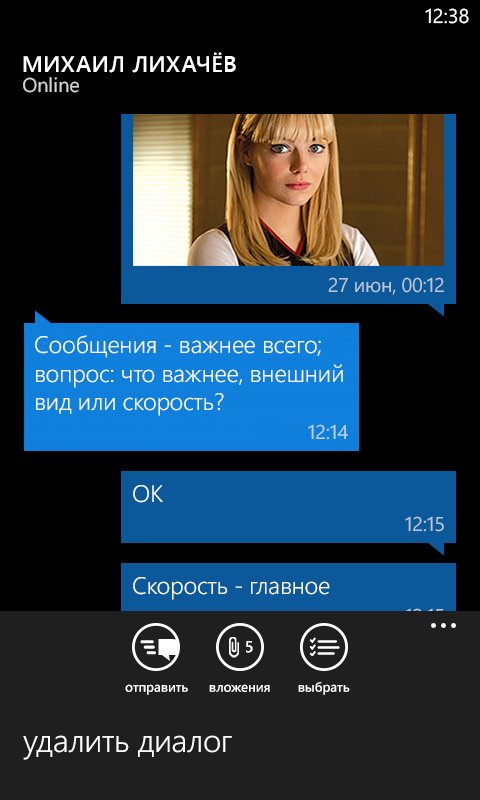
<style>
.page{position:relative;width:480px;height:800px;background:#000000}
.page>*{position:absolute;margin:0}
.t1{font:20px "SegoeWP";color:#ffffff}
.t2{font:22.7px "SegoeWP-Semibold";letter-spacing:0.025em;color:#ffffff;text-transform:uppercase}
.t3{font:24px "SegoeWP-SemiLight";letter-spacing:-0.015em;color:#ffffff}
.t4{font:16px "SegoeWP-Semibold";letter-spacing:-0.01em;color:#ffffff}
.t5{font:25.3px "SegoeWP";letter-spacing:-0.005em;color:#000000}
.t6{font:13.3px "SegoeWP-Semibold";letter-spacing:-0.01em;color:#ffffff}
.t7{font:32px "SegoeWP-SemiLight";letter-spacing:-0.01em;color:#ffffff}
</style>
<div class="page">
<p class="t1" style="left:425px;top:8px;width:44px;height:16px">12:38</p>
<p class="t2" style="left:23px;top:52px;width:213px;height:21px">Михаил Лихачёв</p>
<p class="t3" style="left:35px;top:335px;width:308px;height:81px">Сообщения - важнее всего;<br>вопрос: что важнее, внешний<br>вид или скорость?</p>
<p class="t3" style="left:133px;top:485px;width:30px;height:18px">ОК</p>
<p class="t3" style="left:133px;top:577px;width:197px;height:23px">Скорость - главное</p>
<p class="t4" style="left:246px;top:641px;width:7px;height:12px">5</p>
<p class="t5" style="left:135px;top:668px;width:227px;height:24px">введите сообщение</p>
<p class="t6" style="left:125px;top:684px;width:63px;height:11px">отправить</p>
<p class="t6" style="left:209px;top:684px;width:61px;height:8px">вложения</p>
<p class="t6" style="left:298px;top:681px;width:52px;height:14px">выбрать</p>
<p class="t7" style="left:23px;top:735px;width:209px;height:25px">удалить диалог</p>
</div>
